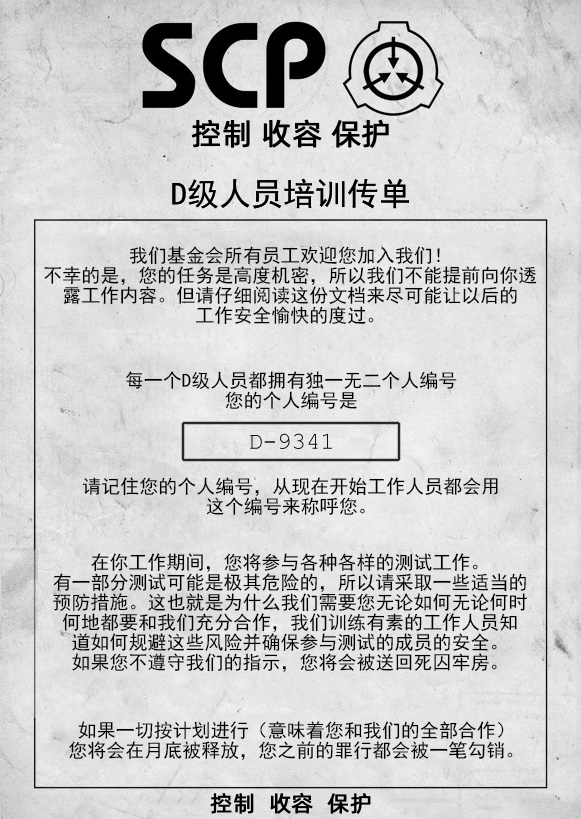
<style>
.page{position:relative;width:581px;height:819px}
.page>*{position:absolute;margin:0}
.t1{font:30px "AlibabaPuHuiTiR";color:#000000;font-weight:bold}
.t2{font:32px "SimHei";color:#000000}
.t3{font:19px/20px "SimHei";color:#000000}
.t4{font:22px "AlibabaPuHuiTiR";color:#000000;font-weight:bold}
</style>
<div class="page">
<p class="t1" style="left:191px;top:119px;width:198px;height:29px">控制 收容 保护</p>
<p class="t2" style="left:172px;top:178px;width:237px;height:31px">D级人员培训传单</p>
<p class="t3" style="left:44px;top:246px;width:493px;height:79px;text-align:center">我们基金会所有员工欢迎您加入我们！<br>不幸的是，您的任务是高度机密，所以我们不能提前向你透<br>露工作内容。但请仔细阅读这份文档来尽可能让以后的<br>工作安全愉快的度过。</p>
<p class="t3" style="left:126px;top:371px;width:331px;height:39px;text-align:center">每一个D级人员都拥有独一无二个人编号<br>您的个人编号是</p>
<p class="t3" style="left:82px;top:477px;width:416px;height:39px;text-align:center">请记住您的个人编号，从现在开始工作人员都会用<br>这个编号来称呼您。</p>
<p class="t3" style="left:53px;top:553px;width:474px;height:119px;text-align:center">在你工作期间，您将参与各种各样的测试工作。<br>有一部分测试可能是极其危险的，所以请采取一些适当的<br>预防措施。这也就是为什么我们需要您无论如何无论何时<br>何地都要和我们充分合作，我们训练有素的工作人员知<br>道如何规避这些风险并确保参与测试的成员的安全。<br>如果您不遵守我们的指示，您将会被送回死囚牢房。</p>
<p class="t3" style="left:69px;top:721px;width:444px;height:39px;text-align:center">如果一切按计划进行（意味着您和我们的全部合作）<br>您将会在月底被释放，您之前的罪行都会被一笔勾销。</p>
<p class="t4" style="left:210px;top:793px;width:161px;height:21px">控制  收容  保护</p>
</div>
